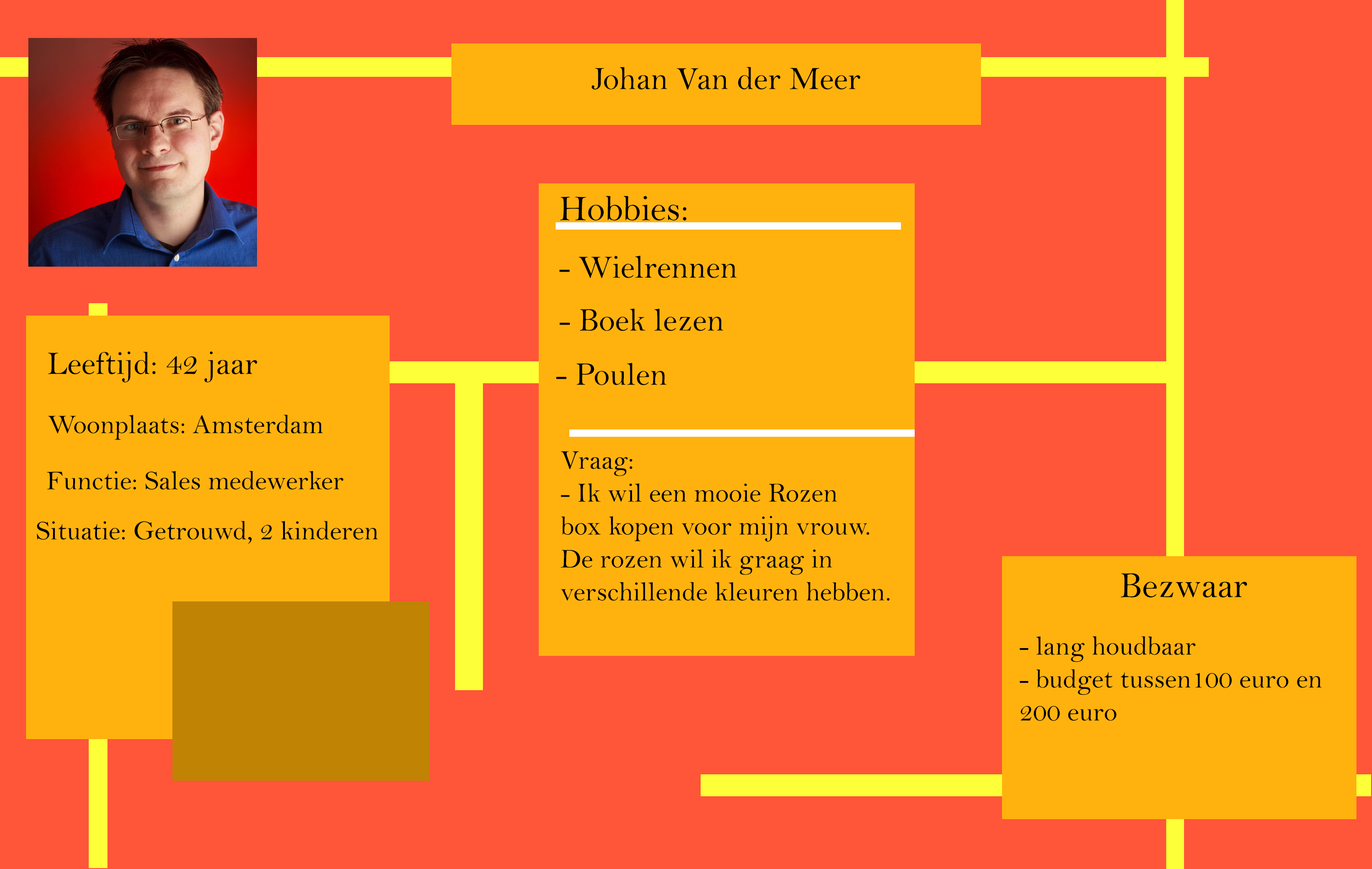
<style>
.page{position:relative;width:1372px;height:869px;background:#ff5539}
.page>*{position:absolute;margin:0}
.t1{font:32.9px "BellMT";color:#000000}
.t2{font:36.6px "BellMT";color:#000000}
.t3{font:27.4px "BellMT";color:#000000}
</style>
<div class="page">
<p class="t1" style="left:591px;top:67px;width:269px;height:23px">Johan Van der Meer</p>
<p class="t2" style="left:560px;top:196px;width:127px;height:24px">Hobbies:</p>
<p class="t1" style="left:559px;top:256px;width:178px;height:22px">- Wielrennen</p>
<p class="t1" style="left:559px;top:308px;width:165px;height:23px">- Boek lezen</p>
<p class="t1" style="left:48px;top:351px;width:210px;height:31px">Leeftijd: 42 jaar</p>
<p class="t1" style="left:556px;top:363px;width:110px;height:22px">- Poulen</p>
<p class="t3" style="left:48px;top:415px;width:275px;height:25px">Woonplaats: Amsterdam</p>
<p class="t3" style="left:561px;top:451px;width:329px;height:150px">Vraag:<br>- Ik wil een mooie Rozen<br>box kopen voor mijn vrouw.<br>De rozen wil ik graag in<br>verschillende kleuren hebben.</p>
<p class="t3" style="left:47px;top:471px;width:296px;height:19px">Functie: Sales medewerker</p>
<p class="t3" style="left:37px;top:521px;width:341px;height:23px">Situatie: Getrouwd, 2 kinderen</p>
<p class="t2" style="left:1121px;top:573px;width:126px;height:25px">Bezwaar</p>
<p class="t3" style="left:1020px;top:636px;width:302px;height:85px">- lang houdbaar<br>- budget tussen100 euro en <br>200 euro</p>
</div>
